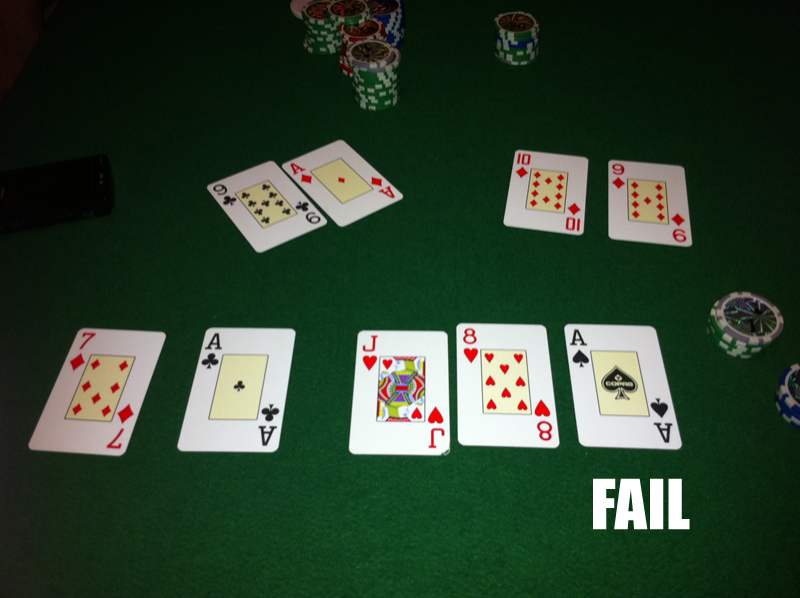
<style>
.page{position:relative;width:800px;height:598px}
.page>*{position:absolute;margin:0}
.t1{font:64.1px "Impact";color:#ffffff}
</style>
<div class="page">
<p class="t1" style="left:593px;top:478px;width:97px;height:52px">FAIL</p>
</div>
